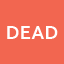
<style>
.page{position:relative;width:64px;height:64px;background:#f26650}
.page>*{position:absolute;margin:0}
.t1{font:20.3px "Corbel-Bold";color:#ffffff}
</style>
<div class="page">
<p class="t1" style="left:7px;top:26px;width:51px;height:13px">DEAD</p>
</div>
